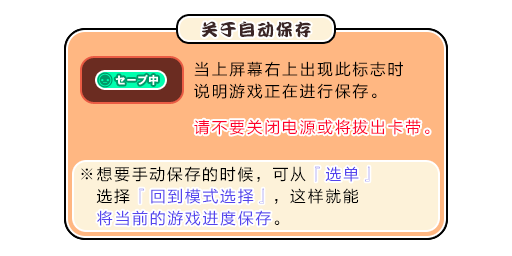
<style>
.page{position:relative;width:512px;height:256px;background:#ffffff}
.page>*{position:absolute;margin:0}
.t1{font:17px "DFPKanTingLiuW9";letter-spacing:0.1em;color:#3b2626}
.t2{font:16px/22px "FZLTHJW--GB1-0";letter-spacing:0.1em;color:#000000}
.t3{font:16px "FZLTHJW--GB1-0";letter-spacing:0.1em;color:#ff002a}
.t4{font:16px/22px "FZLTHJW--GB1-0";letter-spacing:0.1em;color:#5444ed}
.t5{font:16px "FZLTHJW--GB1-0";letter-spacing:0.1em;color:#5444ed}
</style>
<div class="page">
<p class="t1" style="left:201px;top:21px;width:110px;height:17px">关于自动保存</p>
<p class="t2" style="left:194px;top:61px;width:209px;height:38px">当上屏幕右上出现此标志时<br>说明游戏正在进行保存。</p>
<p class="t3" style="left:194px;top:119px;width:236px;height:16px">请不要关闭电源或将拔出卡带。</p>
<p class="t2" style="left:81px;top:166px;width:289px;height:60px">※想要手动保存的时候，可从<span class="t4">『选单』</span><br>　选择<span class="t4">『回到模式选择』</span>，这样就能<br>　<span class="t4">将当前的游戏进度保存</span>。</p>
<p class="t5" style="left:315px;top:166px;width:55px;height:16px">『选单』</p>
<p class="t4" style="left:97px;top:188px;width:174px;height:38px">『回到模式选择』<br>将当前的游戏进度保存</p>
</div>
